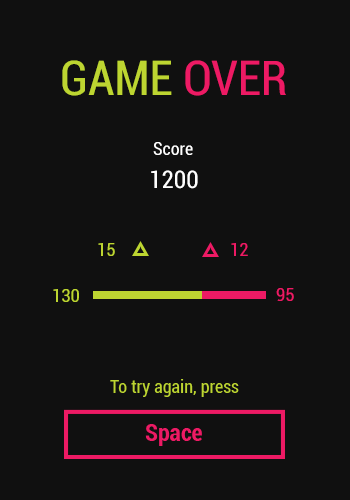
<style>
.page{position:relative;width:350px;height:500px;background:#101010}
.page>*{position:absolute;margin:0}
.t1{font:48px "Roboto-Condensed";color:#bdd631}
.t2{font:48px "Roboto-Condensed";color:#ed1a64}
.t3{font:18px "Roboto-Condensed";color:#ffffff}
.t4{font:24px "Roboto-Condensed";color:#ffffff}
.t5{font:18px "Roboto-Condensed";color:#bdd631}
.t6{font:18px "Roboto-Condensed";color:#ed1a64}
</style>
<div class="page">
<p class="t1" style="left:62px;top:60px;width:224px;height:36px">GAME<span class="t2"> OVER</span></p>
<p class="t3" style="left:153px;top:142px;width:40px;height:13px">Score</p>
<p class="t4" style="left:151px;top:170px;width:47px;height:19px">1200</p>
<p class="t5" style="left:98px;top:243px;width:17px;height:13px">15</p>
<p class="t6" style="left:231px;top:243px;width:17px;height:13px">12</p>
<p class="t5" style="left:53px;top:289px;width:26px;height:13px">130</p>
<p class="t6" style="left:276px;top:288px;width:18px;height:13px">95</p>
</div>
